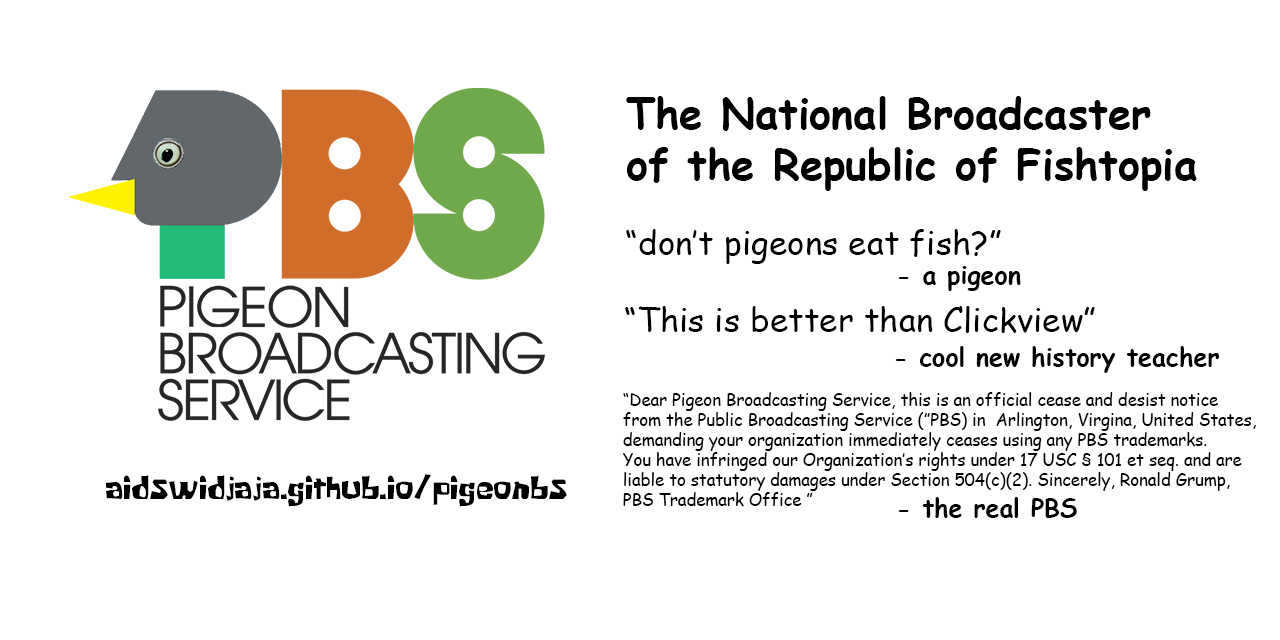
<style>
.page{position:relative;width:1280px;height:640px;background:#ffffff}
.page>*{position:absolute;margin:0}
.t1{font:10.1px "ComicSansMS-Bold";color:#000000}
.t2{font:33.3px "ComicSansMS";color:#000000}
.t3{font:25px "ComicSansMS-Bold";color:#000000}
.t4{font:16.7px "ComicSansMS";color:#000000}
.t5{font:33.3px "KrabbyPatty";color:#000000}
</style>
<div class="page">
<p class="t1" style="left:626px;top:96px;width:571px;height:95px">The National Broadcaster<br>of the Republic of Fishtopia</p>
<p class="t2" style="left:626px;top:229px;width:375px;height:35px">“don’t pigeons eat fish?”</p>
<p class="t3" style="left:898px;top:266px;width:123px;height:25px">- a pigeon</p>
<p class="t2" style="left:625px;top:306px;width:470px;height:27px">“This is better than Clickview”</p>
<p class="t3" style="left:895px;top:346px;width:324px;height:27px">- cool new history teacher</p>
<p class="t4" style="left:623px;top:392px;width:633px;height:115px">“Dear Pigeon Broadcasting Service, this is an official cease and desist notice <br>from the Public Broadcasting Service (”PBS) in  Arlington, Virgina, United States, <br>demanding your organization immediately ceases using any PBS trademarks. <br>You have infringed our Organization’s rights under 17 USC § 101 et seq. and are <br>liable to statutory damages under Section 504(c)(2). Sincerely, Ronald Grump, <br>PBS Trademark Office ”</p>
<p class="t5" style="left:106px;top:474px;width:461px;height:33px">aidswidjaja.github.io/pigeonbs</p>
<p class="t3" style="left:898px;top:497px;width:179px;height:21px">- the real PBS</p>
</div>
